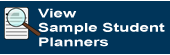
<style>
.page{position:relative;width:170px;height:55px;background:#00355a}
.page>*{position:absolute;margin:0}
.t1{font:12px "Arial-BoldMT";color:#fefefe;scale:1.4 1}
</style>
<div class="page">
<p class="t1" style="left:38px;top:8px;width:127px;height:39px">View<br>Sample Student<br>Planners</p>
</div>
